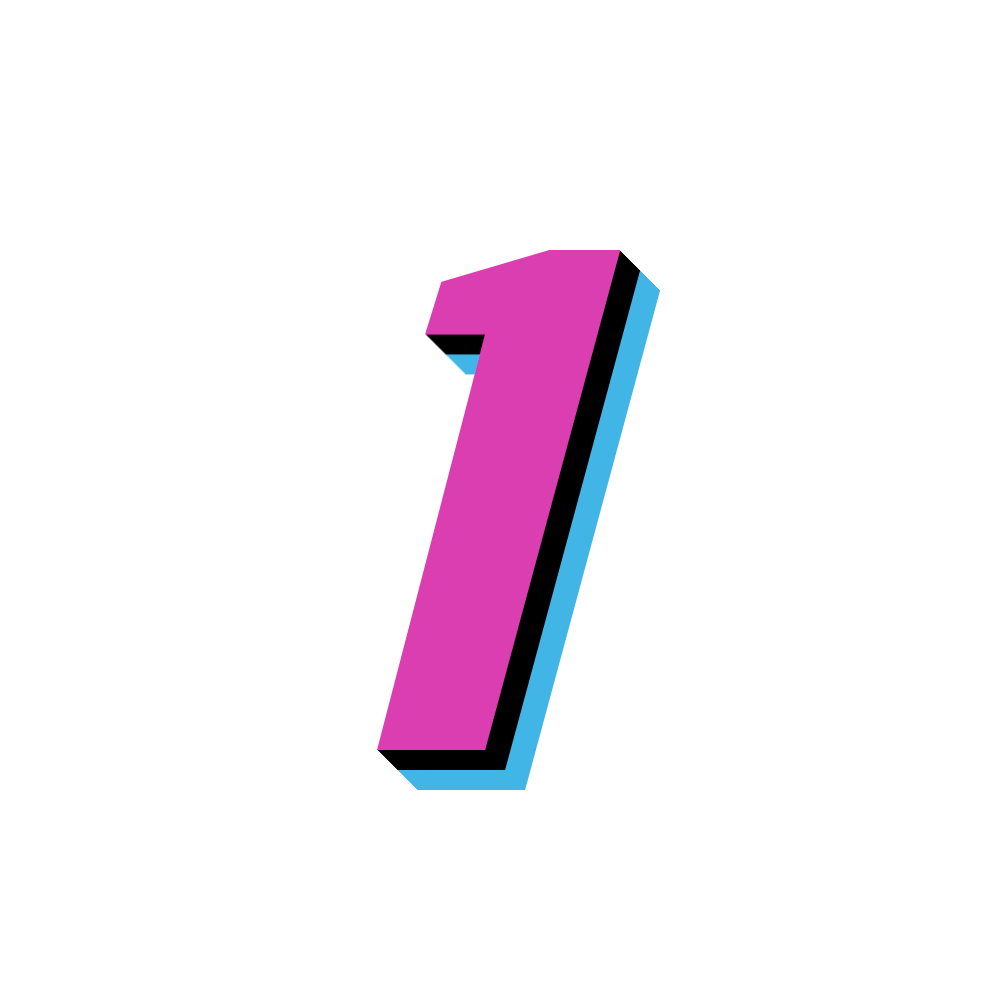
<style>
.page{position:relative;width:1000px;height:1000px;background:#ffffff}
.page>*{position:absolute;margin:0}
.t1{font:625px "NBAHeat";color:#db3eb1}
</style>
<div class="page">
<p class="t1" style="left:377px;top:250px;width:244px;height:500px">1</p>
</div>
